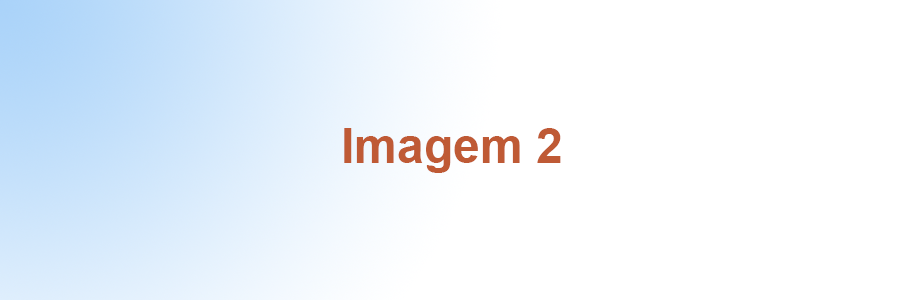
<style>
.page{position:relative;width:900px;height:300px;background:#ffffff}
.page>*{position:absolute;margin:0}
.t1{font:48px "Arial-BoldMT";color:#bf5a35}
</style>
<div class="page">
<p class="t1" style="left:344px;top:128px;width:217px;height:45px">Imagem 2</p>
</div>
